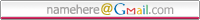
<style>
.page{position:relative;width:200px;height:20px;background:#ffffff}
.page>*{position:absolute;margin:0}
.t1{font:12px "Tahoma";color:#a5a4a4}
.t2{font:12px "MicrosoftSansSerif";color:#c3a721;font-weight:bold}
</style>
<div class="page">
<p class="t1" style="left:47px;top:4px;width:53px;height:10px">namehere</p>
<p class="t2" style="left:101px;top:3px;width:12px;height:12px">@</p>
<p class="t1" style="left:149px;top:7px;width:25px;height:8px">.com</p>
</div>
